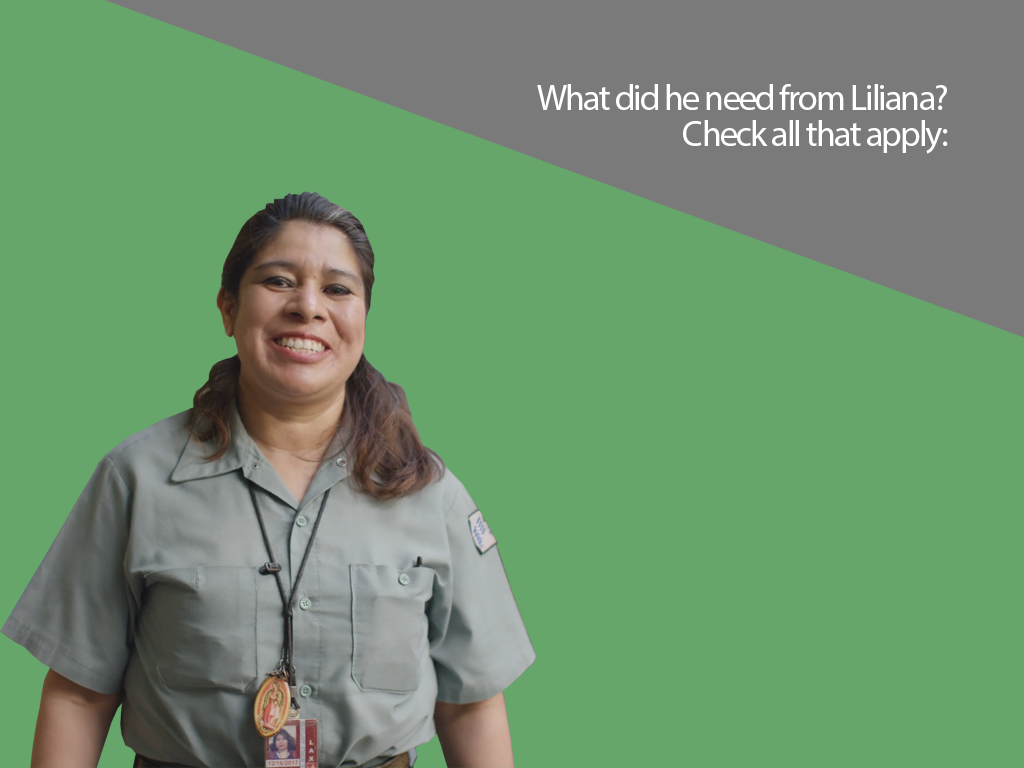
<style>
.page{position:relative;width:1024px;height:768px;background:#66a66b}
.page>*{position:absolute;margin:0}
.t1{font:36px/36px "MyriadPro-Regular";letter-spacing:-0.05em;color:#ffffff}
</style>
<div class="page">
<p class="t1" style="left:537px;top:84px;width:411px;height:70px;text-align:right">What did he need from Liliana?<br>Check all that apply:</p>
</div>
